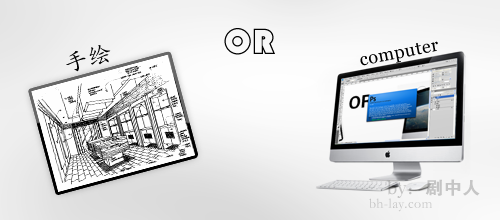
<style>
.page{position:relative;width:500px;height:220px}
.page>*{position:absolute;margin:0}
.t1{font:36px "STCaiyun";letter-spacing:0.025em;color:#000000}
.t2{font:18px "Georgia";letter-spacing:0.025em;color:#000000}
.t3{font:24px "STKaiti";letter-spacing:0.025em;color:#000000}
.t4{font:18px "FZDHTJW--GB1-0";letter-spacing:0.025em;color:#c5c5c5}
.t5{font:18px "Georgia";letter-spacing:0.025em;color:#c5c5c5}
.t6{font:18px "SimSun";letter-spacing:0.025em;color:#c5c5c5}
.t7{font:14px "STKaiti";letter-spacing:0.025em}
</style>
<div class="page">
<p class="t1" style="left:224px;top:28px;width:51px;height:27px">OR</p>
<p class="t2" style="left:360px;top:41px;width:78px;height:25px;rotate:-11deg">computer</p>
<p class="t3" style="left:66px;top:45px;width:45px;height:27px;rotate:-15deg">手绘</p>
<p class="t4" style="left:386px;top:179px;width:94px;height:19px"><span class="t5">by</span><span class="t6">：</span>剧中人</p>
<p class="t7" style="left:369px;top:198px;width:63px;height:14px">bh-lay.com</p>
</div>
